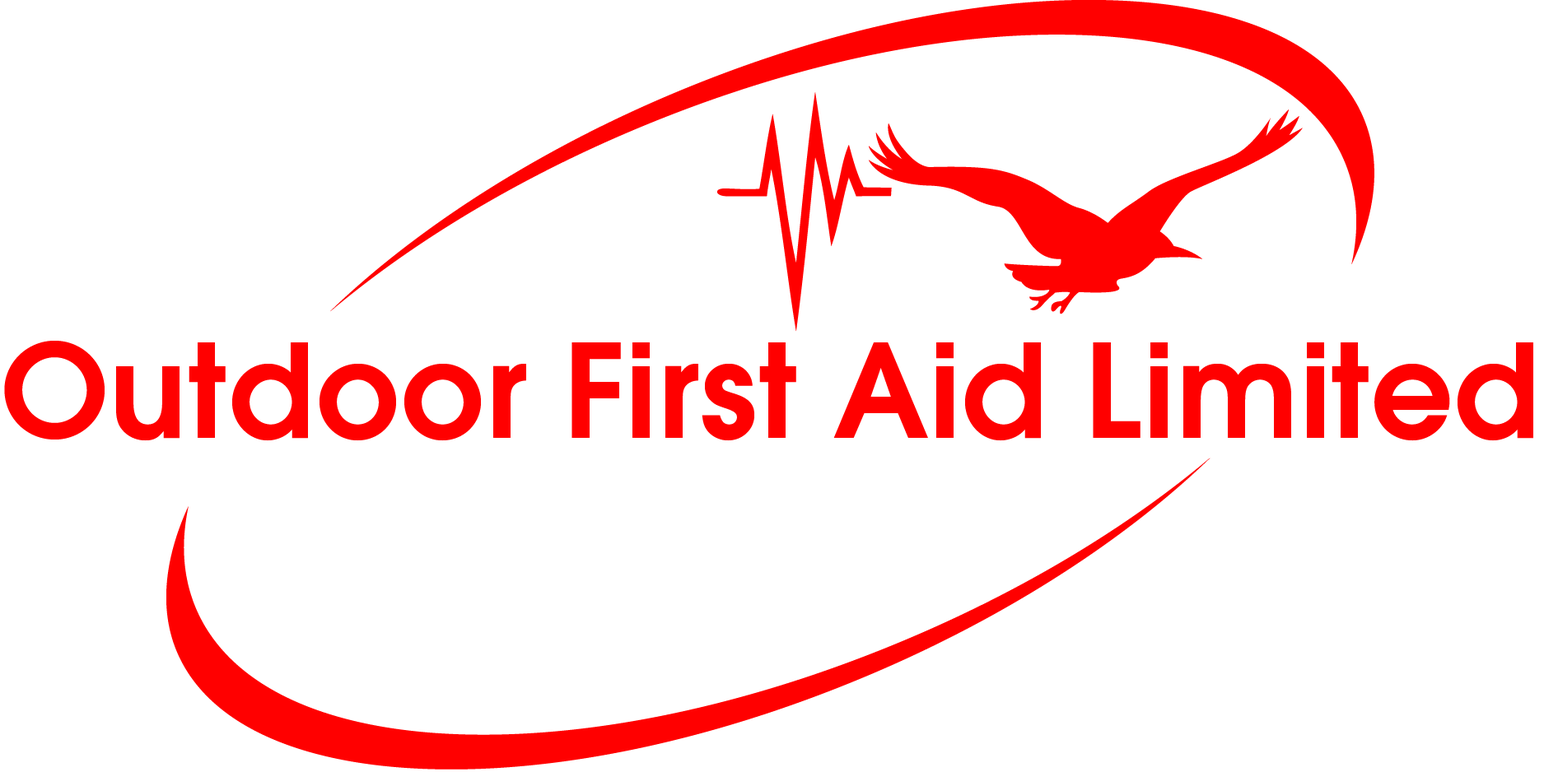
<style>
.page{position:relative;width:1544px;height:772px;background:#ffffff}
.page>*{position:absolute;margin:0}
.t1{font:143.5px "AvantGarGotItcTEE-Demi";color:#ff0000}
</style>
<div class="page">
<p class="t1" style="left:4px;top:341px;width:1529px;height:100px">Outdoor First Aid Limited</p>
</div>
